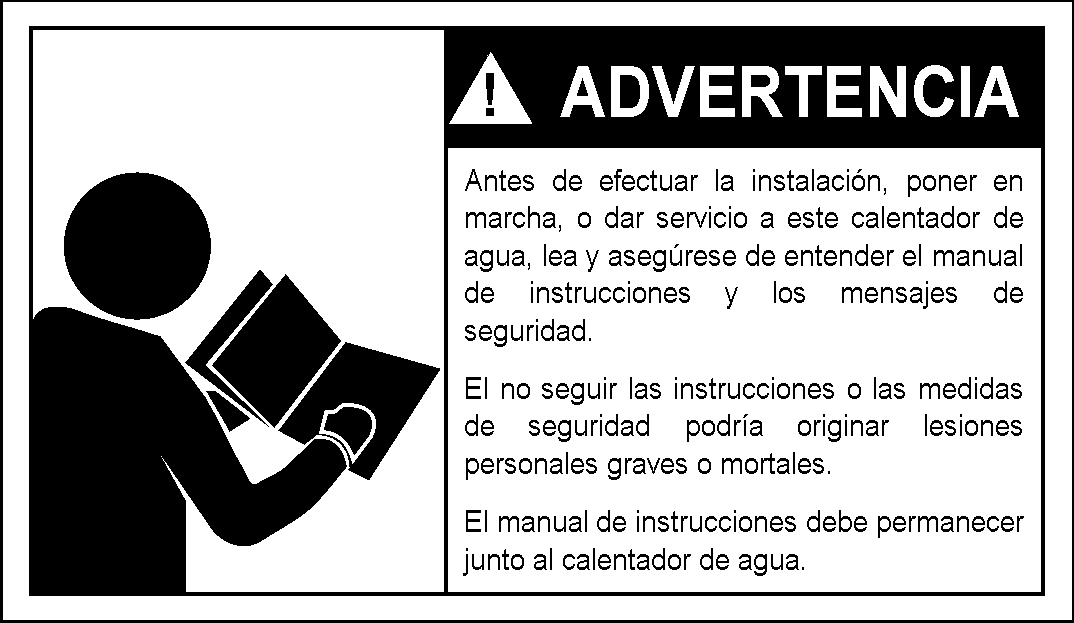
<style>
.page{position:relative;width:1074px;height:623px;background:#ffffff}
.page>*{position:absolute;margin:0}
.t1{font:70.8px "Arial-BoldMT";color:#ffffff;scale:0.9 1}
.t2{font:31.2px "ArialMT";color:#010101;scale:0.9 1}
</style>
<div class="page">
<p class="t1" style="left:560px;top:65px;width:459px;height:52px">ADVERTENCIA</p>
<p class="t2" style="left:463px;top:169px;width:561px;height:407px;text-align:justify">Antes de efectuar la instalación, poner en marcha, o dar servicio a este calentador de agua, lea y asegúrese de entender el manual de instrucciones y los mensajes de seguridad.<br>El no seguir las instrucciones o las medidas de seguridad podría originar lesiones personales graves o mortales.<br>El manual de instrucciones debe permanecer junto al calentador de agua.</p>
</div>
